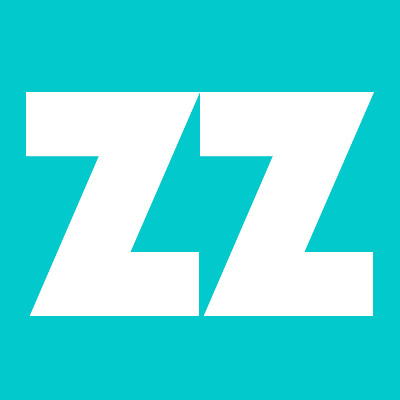
<style>
.page{position:relative;width:400px;height:400px;background:#02c9cc}
.page>*{position:absolute;margin:0}
.t1{font:335.8px "Bauhaus93";color:#ffffff;text-transform:uppercase}
</style>
<div class="page">
<p class="t1" style="left:26px;top:92px;width:348px;height:224px">zz</p>
<p class="t1" style="left:26px;top:92px;width:348px;height:224px">zz</p>
</div>
